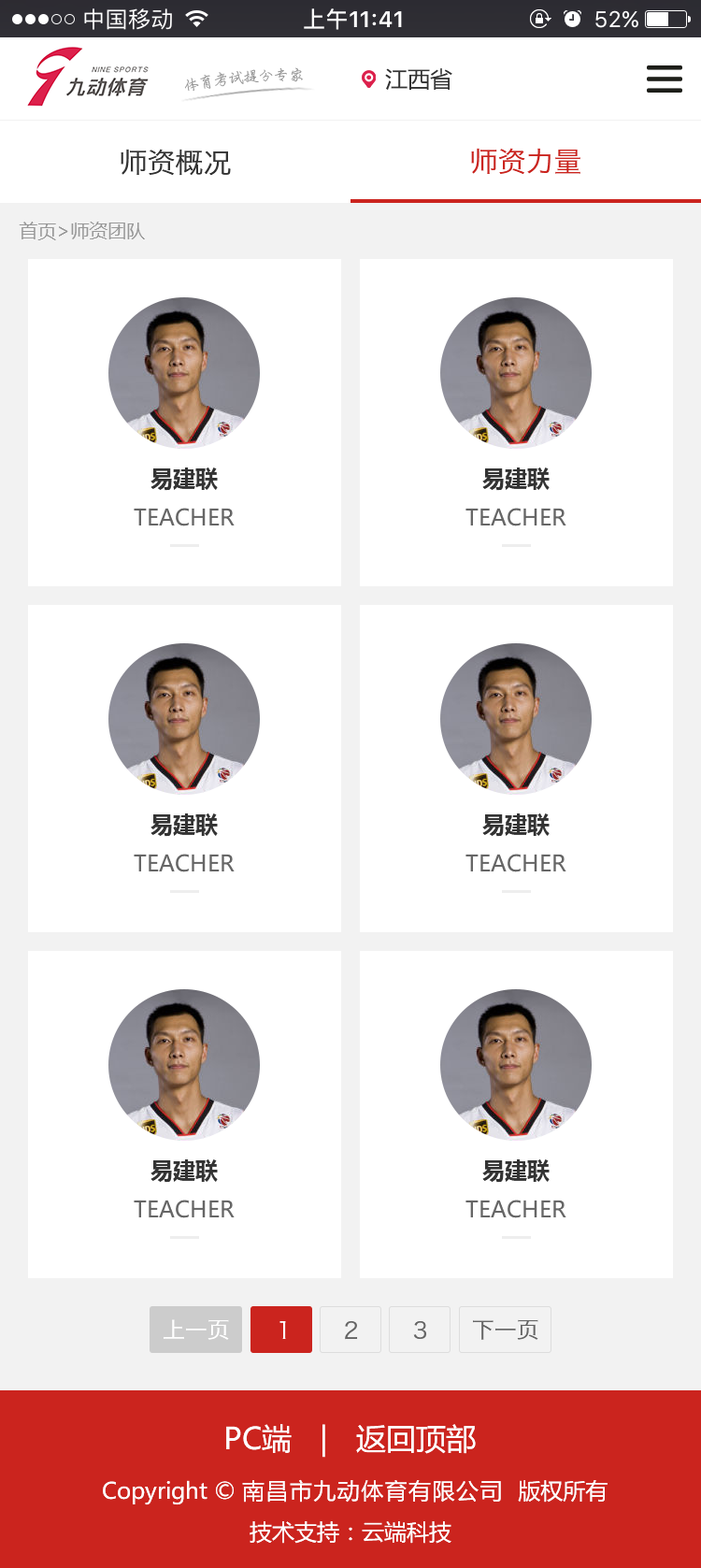
<style>
.page{position:relative;width:701px;height:1568px;background:#ffffff}
.page>*{position:absolute;margin:0}
.t1{font:15px "PensinkaiEG-Medium-GB";color:#8e8e8e}
.t2{font:22.4px "MicrosoftYaHei";color:#333333}
.t3{font:28.1px "HiraginoSansGB-W3";color:#333333}
.t4{font:28.1px "HiraginoSansGB-W3";color:#cb241e}
.t5{font:18.7px "MicrosoftYaHei";color:#989898}
.t6{font:22.4px "MicrosoftYaHei-Bold";color:#333333}
.t7{font:22.4px "MicrosoftYaHei";color:#666666;text-transform:uppercase}
.t8{font:22.4px "HiraginoSansGB-W3";color:#ffffff}
.t9{font:22.4px "HiraginoSansGB-W3";color:#666666}
.t10{font:29.9px "MicrosoftYaHei";color:#ffffff}
.t11{font:22.4px "MicrosoftYaHei";color:#ffffff}
.t12{font:22.4px "MicrosoftYaHei";letter-spacing:0.06em;color:#ffffff}
</style>
<div class="page">
<p class="t1" style="left:184px;top:67px;width:119px;height:24px;rotate:4deg">体育考试提分专家</p>
<p class="t2" style="left:385px;top:68px;width:68px;height:23px">江西省</p>
<p class="t3" style="left:121px;top:149px;width:110px;height:27px">师资概况</p>
<p class="t4" style="left:471px;top:148px;width:110px;height:26px">师资力量</p>
<p class="t5" style="left:19px;top:222px;width:126px;height:18px">首页&gt;师资团队</p>
<p class="t6" style="left:151px;top:468px;width:67px;height:23px">易建联</p>
<p class="t6" style="left:482px;top:468px;width:68px;height:23px">易建联</p>
<p class="t7" style="left:134px;top:508px;width:101px;height:18px">teacher</p>
<p class="t7" style="left:466px;top:508px;width:101px;height:18px">teacher</p>
<p class="t6" style="left:151px;top:813px;width:67px;height:24px">易建联</p>
<p class="t6" style="left:482px;top:813px;width:68px;height:24px">易建联</p>
<p class="t7" style="left:134px;top:854px;width:101px;height:18px">teacher</p>
<p class="t7" style="left:466px;top:854px;width:101px;height:18px">teacher</p>
<p class="t6" style="left:151px;top:1159px;width:67px;height:24px">易建联</p>
<p class="t6" style="left:482px;top:1159px;width:68px;height:24px">易建联</p>
<p class="t7" style="left:134px;top:1200px;width:101px;height:18px">teacher</p>
<p class="t7" style="left:466px;top:1200px;width:101px;height:18px">teacher</p>
<p class="t8" style="left:164px;top:1319px;width:65px;height:21px">上一页</p>
<p class="t8" style="left:280px;top:1321px;width:6px;height:18px">1</p>
<p class="t9" style="left:345px;top:1321px;width:13px;height:19px">2</p>
<p class="t9" style="left:413px;top:1321px;width:14px;height:18px">3</p>
<p class="t9" style="left:473px;top:1319px;width:66px;height:21px">下一页</p>
<p class="t10" style="left:226px;top:1424px;width:250px;height:34px">PC端   |   返回顶部</p>
<p class="t11" style="left:103px;top:1479px;width:505px;height:26px">Copyright © <span class="t12">南昌市九动体育有限公司 </span> 版权所有</p>
<p class="t11" style="left:250px;top:1521px;width:202px;height:23px">技术支持：云端科技</p>
</div>
